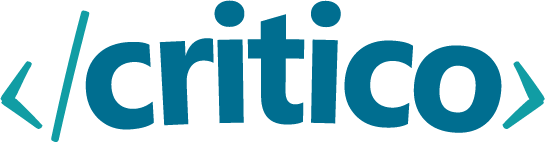
<style>
.page{position:relative;width:545px;height:142px;background:#ffffff}
.page>*{position:absolute;margin:0}
.t1{font:165px "SegoeUI-Bold";letter-spacing:-0.025em;color:#006e90;scale:0.91 1}
.t2{font:165px "CalifornianFB-Bold";letter-spacing:-0.025em;color:#119da4;scale:0.91 1}
</style>
<div class="page">
<p class="t1" style="left:0px;top:0px;width:545px;height:142px"><span class="t2">&lt;/</span>critico<span class="t2">&gt;</span></p>
</div>
